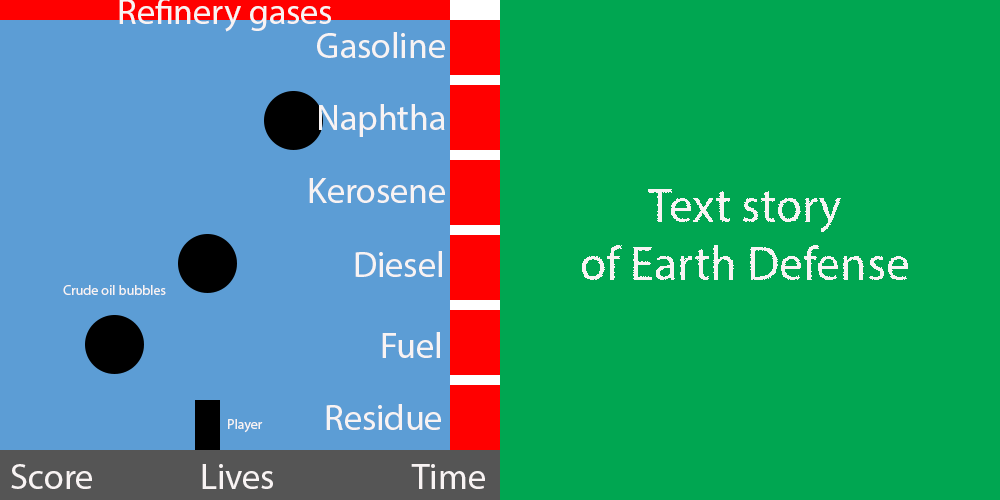
<style>
.page{position:relative;width:1000px;height:500px;background:#00a651}
.page>*{position:absolute;margin:0}
.t1{font:36px "MyriadPro-Regular";color:#f8f3f3}
.t2{font:48px "MyriadPro-Regular";color:#f8f3f3}
.t3{font:14px "MyriadPro-Regular";color:#f8f3f3}
</style>
<div class="page">
<p class="t1" style="left:119px;top:0px;width:212px;height:32px">Refinery gases</p>
<p class="t1" style="left:317px;top:32px;width:128px;height:26px">Gasoline</p>
<p class="t1" style="left:319px;top:104px;width:126px;height:33px">Naphtha</p>
<p class="t1" style="left:309px;top:178px;width:136px;height:25px">Kerosene</p>
<p class="t2" style="left:581px;top:189px;width:327px;height:91px;text-align:center">Text story<br>of Earth Defense</p>
<p class="t1" style="left:355px;top:251px;width:87px;height:26px">Diesel</p>
<p class="t3" style="left:63px;top:285px;width:103px;height:10px">Crude oil bubbles</p>
<p class="t1" style="left:382px;top:332px;width:58px;height:26px">Fuel</p>
<p class="t1" style="left:326px;top:404px;width:115px;height:26px">Residue</p>
<p class="t3" style="left:228px;top:419px;width:35px;height:14px">Player</p>
<p class="t1" style="left:11px;top:464px;width:81px;height:25px">Score</p>
<p class="t1" style="left:202px;top:464px;width:71px;height:25px">Lives</p>
<p class="t1" style="left:411px;top:464px;width:74px;height:25px">Time</p>
</div>
